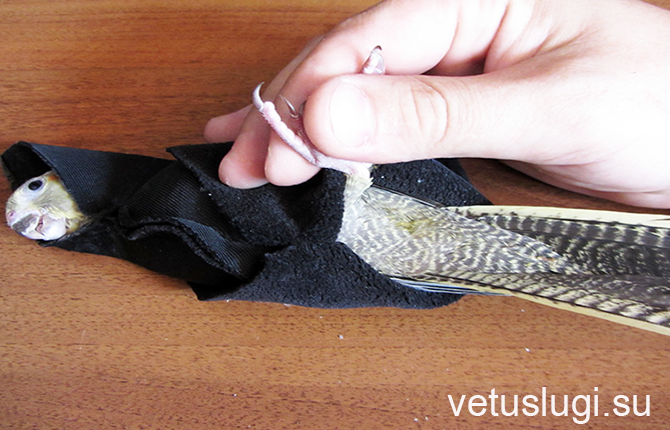
<style>
.page{position:relative;width:670px;height:430px}
.page>*{position:absolute;margin:0}
.t1{font:40.3px "ArialNarrow";letter-spacing:0.002em;color:#f9f3f3;scale:1.17 1}
</style>
<div class="page">
<p class="t1" style="left:447px;top:387px;width:203px;height:37px">vetuslugi.su</p>
</div>
